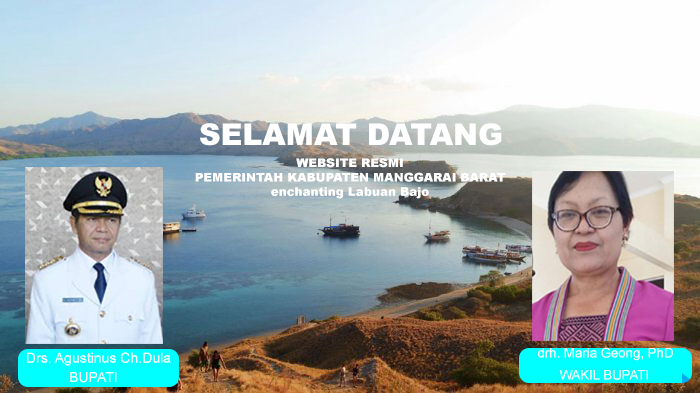
<style>
.page{position:relative;width:700px;height:393px}
.page>*{position:absolute;margin:0}
.t1{font:30px "Arial-Black";color:#ffffff}
.t2{font:12px "Arial-Black";color:#ffffff}
.t3{font:14px "ArialMT";color:#ffffff}
.t4{font:13.3px "ArialMT";color:#ffffff}
</style>
<div class="page">
<p class="t1" style="left:200px;top:123px;width:302px;height:23px">SELAMAT DATANG</p>
<p class="t2" style="left:195px;top:158px;width:311px;height:41px;text-align:center">WEBSITE RESMI<br>PEMERINTAH KABUPATEN MANGGARAI BARAT<br>enchanting Labuan Bajo</p>
<p class="t3" style="left:27px;top:352px;width:144px;height:14px">Drs. Agustinus Ch.Dula</p>
<p class="t4" style="left:538px;top:347px;width:135px;height:14px">drh. Maria Geong, PhD</p>
<p class="t3" style="left:70px;top:372px;width:47px;height:11px">BUPATI</p>
<p class="t4" style="left:559px;top:370px;width:89px;height:10px">WAKIL BUPATI</p>
</div>
